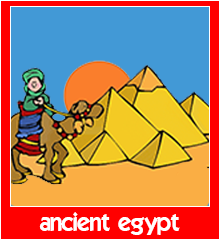
<style>
.page{position:relative;width:220px;height:240px;background:#4299d6}
.page>*{position:absolute;margin:0}
.t1{font:24px "ELEGANCE";color:#ffffff}
</style>
<div class="page">
<p class="t1" style="left:39px;top:212px;width:141px;height:23px">ancient egypt</p>
</div>
